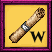
<style>
.page{position:relative;width:52px;height:52px;background:#facf54}
.page>*{position:absolute;margin:0}
.t1{font:18px "Cinzel-Bold";color:#0f0f0a}
</style>
<div class="page">
<p class="t1" style="left:29px;top:31px;width:17px;height:12px">w</p>
</div>
